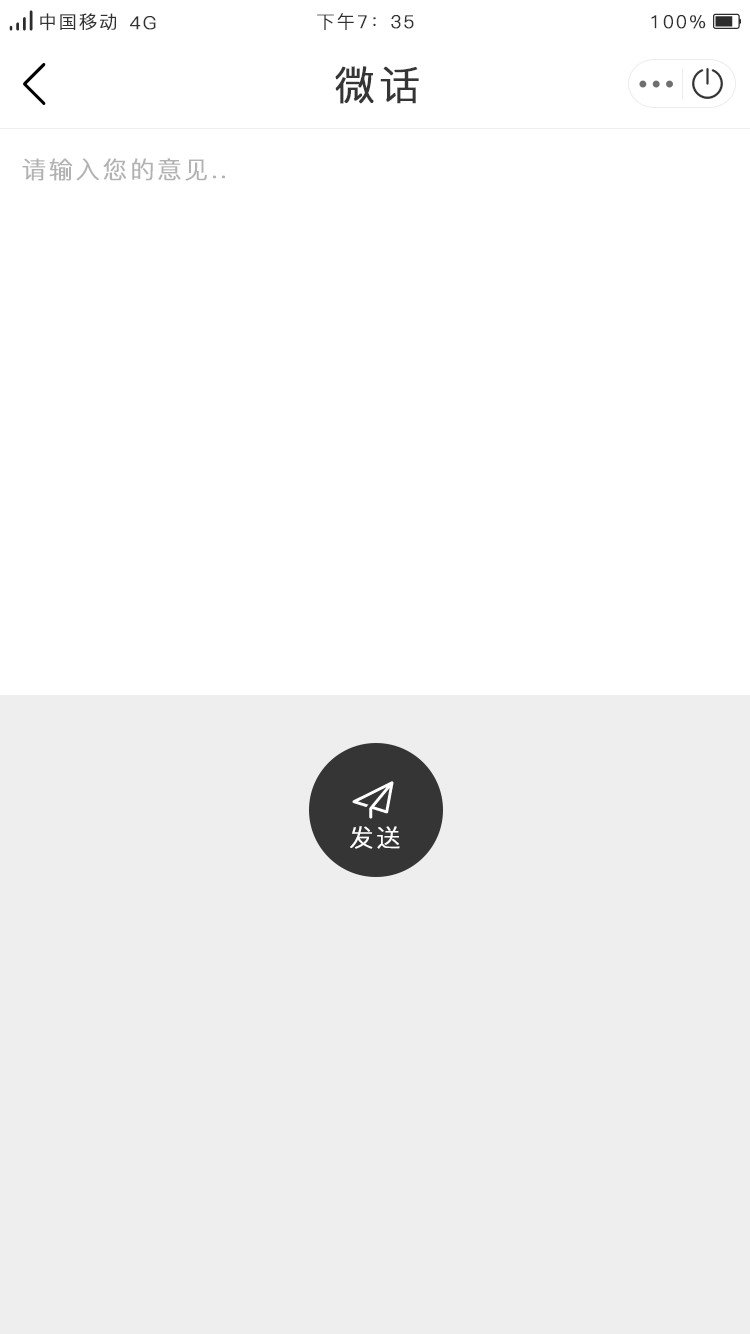
<style>
.page{position:relative;width:750px;height:1334px;background:#ffffff}
.page>*{position:absolute;margin:0}
.t1{font:18px "PingFang-SC-Regular";letter-spacing:0.1em;color:#323232;font-weight:bold}
.t2{font:40px "PingFang-SC-Regular";letter-spacing:0.1em;color:#353535;font-weight:bold}
.t3{font:24px "PingFang-SC-Regular";letter-spacing:0.1em;color:#b2b2b2;font-weight:bold}
</style>
<div class="page">
<p class="t1" style="left:40px;top:13px;width:76px;height:18px">中国移动</p>
<p class="t1" style="left:130px;top:16px;width:26px;height:14px">4G</p>
<p class="t1" style="left:317px;top:13px;width:97px;height:17px">下午7：35</p>
<p class="t1" style="left:651px;top:15px;width:55px;height:14px">100%</p>
<p class="t2" style="left:335px;top:66px;width:84px;height:38px">微话</p>
<p class="t3" style="left:22px;top:158px;width:203px;height:23px">请输入您的意见..</p>
</div>
